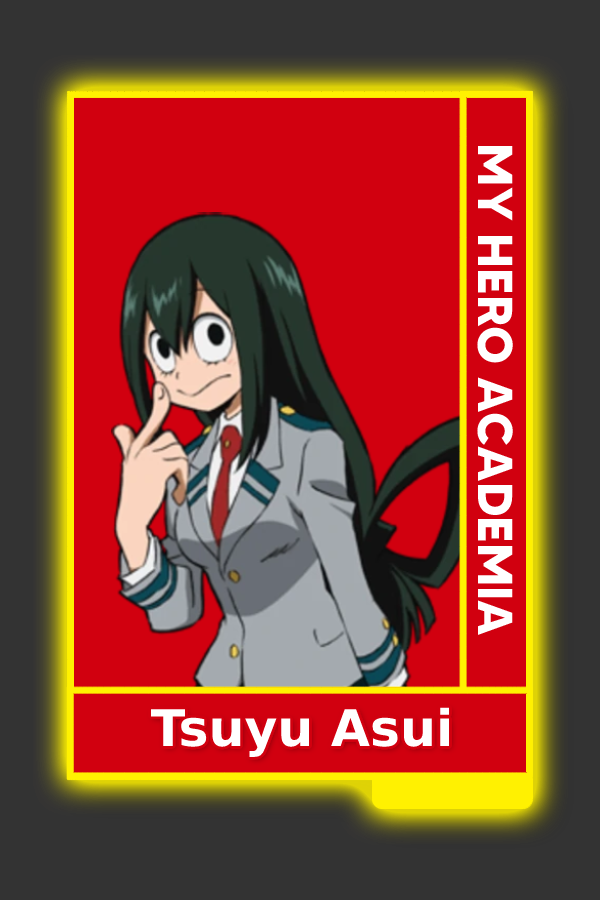
<style>
.page{position:relative;width:600px;height:900px;background:#d1000f}
.page>*{position:absolute;margin:0}
.t1{font:48.8px "MADETOMMY-Bold";color:#ffffff}
.t2{font:50.5px "MADETOMMY-Bold";color:#ffffff}
</style>
<div class="page">
<p class="t1" style="left:477px;top:146px;width:36px;height:489px;rotate:90deg">MY HERO ACADEMIA</p>
<p class="t2" style="left:151px;top:707px;width:298px;height:50px">Tsuyu Asui</p>
</div>
